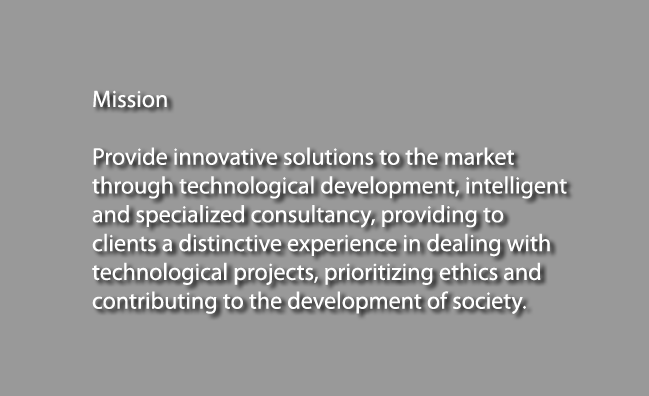
<style>
.page{position:relative;width:649px;height:396px;background:#999999}
.page>*{position:absolute;margin:0}
.t1{font:24px "MyriadPro-Regular";color:#ffffff}
</style>
<div class="page">
<p class="t1" style="left:92px;top:90px;width:475px;height:224px">Mission<br> <br>Provide innovative solutions to the market <br>through technological development, intelligent <br>and specialized consultancy, providing to <br>clients a distinctive experience in dealing with <br>technological projects, prioritizing ethics and <br>contributing to the development of society.</p>
</div>
